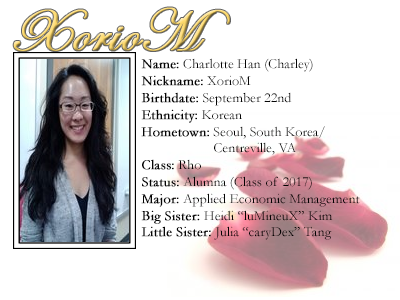
<style>
.page{position:relative;width:400px;height:300px;background:#ffffff}
.page>*{position:absolute;margin:0}
.t1{font:60px "EdwardianScriptITC";font-weight:bold}
.t2{font:14px "Garamond";color:#000000}
.t3{font:14px "Garamond";color:#000000;font-weight:bold}
</style>
<div class="page">
<p class="t1" style="left:13px;top:7px;width:217px;height:45px">XorioM</p>
<p class="t2" style="left:141px;top:58px;width:219px;height:182px"><span class="t3">Name:</span> Charlotte Han (Charley)<br><span class="t3">Nickname:</span> XorioM<br><span class="t3">Birthdate:</span> September 22nd<br><span class="t3">Ethnicity:</span> Korean<br><span class="t3">Hometown:</span> Seoul, South Korea/<br>  Centreville, VA<br><span class="t3">Class:</span> Rho<br><span class="t3">Status:</span> Alumna (Class of 2017)<br><span class="t3">Major:</span> Applied Economic Management<br><span class="t3">Big Sister: </span>Heidi “luMineuX” Kim<br><span class="t3">Little Sister: </span>Julia “caryDex” Tang</p>
</div>
